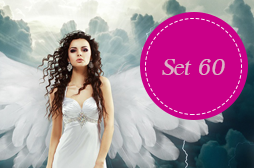
<style>
.page{position:relative;width:254px;height:168px}
.page>*{position:absolute;margin:0}
.t1{font:36px "EucrosiaUPCItalic";letter-spacing:-0.025em;color:#dab2c6}
</style>
<div class="page">
<p class="t1" style="left:162px;top:59px;width:63px;height:16px">Set 60</p>
</div>
